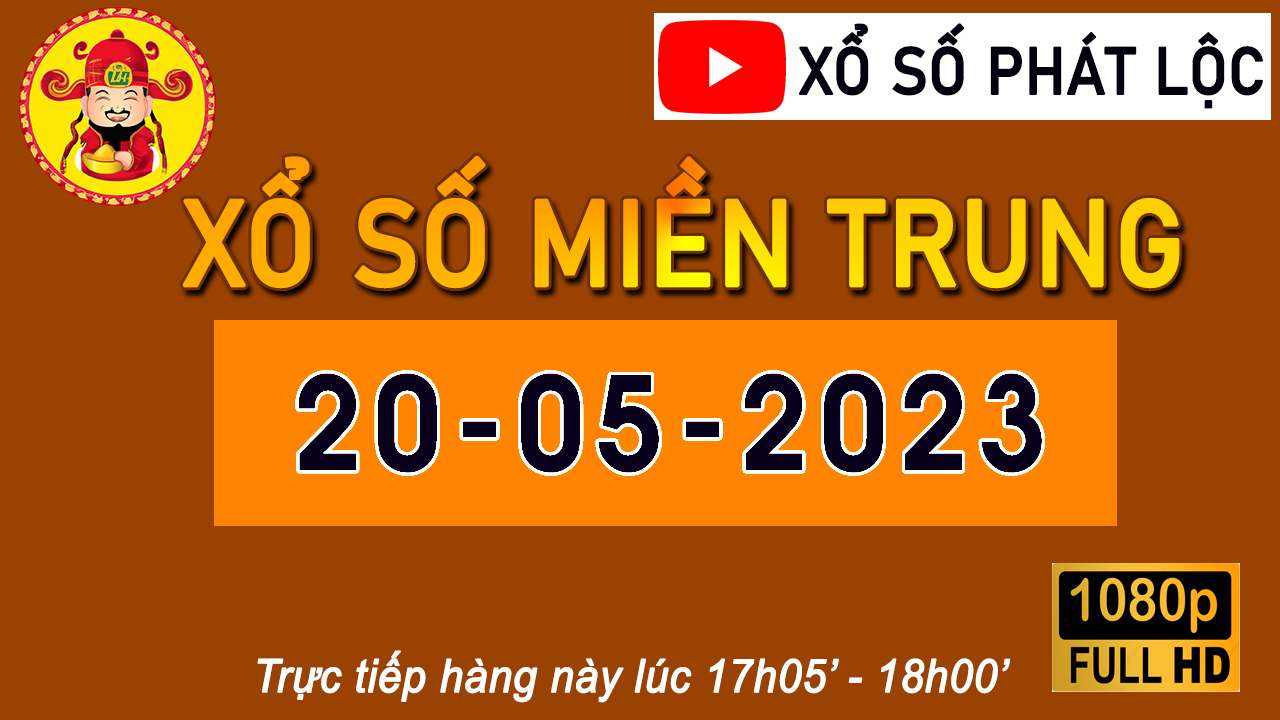
<style>
.page{position:relative;width:1280px;height:720px;background:#9a4201}
.page>*{position:absolute;margin:0}
.t1{font:65.4px "Bahnschrift";color:#04000d;text-transform:uppercase;font-weight:bold;scale:0.92 1}
.t2{font:119.9px "Bahnschrift";text-transform:uppercase;font-weight:bold;scale:0.92 1}
.t3{font:45.8px "Arial-ItalicMT";color:#ffffff;font-weight:bold;scale:0.92 1}
</style>
<div class="page">
<p class="t1" style="left:798px;top:23px;width:465px;height:86px">Xổ số phát lộc</p>
<p class="t2" style="left:182px;top:155px;width:998px;height:134px">xổ số miền Trung</p>
<p class="t3" style="left:257px;top:650px;width:754px;height:53px">Trực tiếp hàng này lúc 17h05’ - 18h00’</p>
</div>
